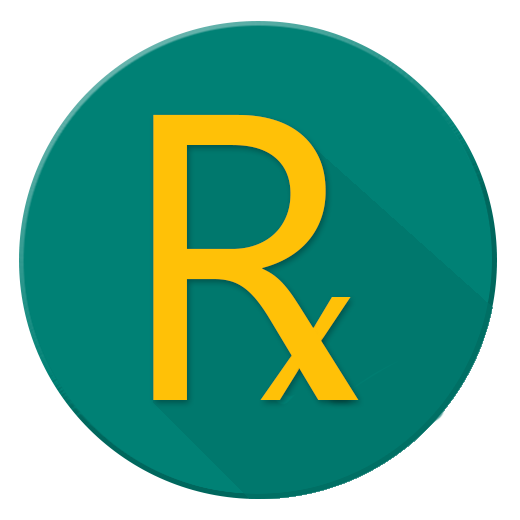
<style>
.page{position:relative;width:520px;height:520px;background:#ffffff}
.page>*{position:absolute;margin:0}
.t1{font:406.5px "NirmalaUI";color:#ffc107}
.t2{font:206.2px "NirmalaUI";color:#ffc107}
</style>
<div class="page">
<p class="t1" style="left:153px;top:114px;width:206px;height:286px">R</p>
<p class="t2" style="left:260px;top:297px;width:91px;height:103px">x</p>
</div>
